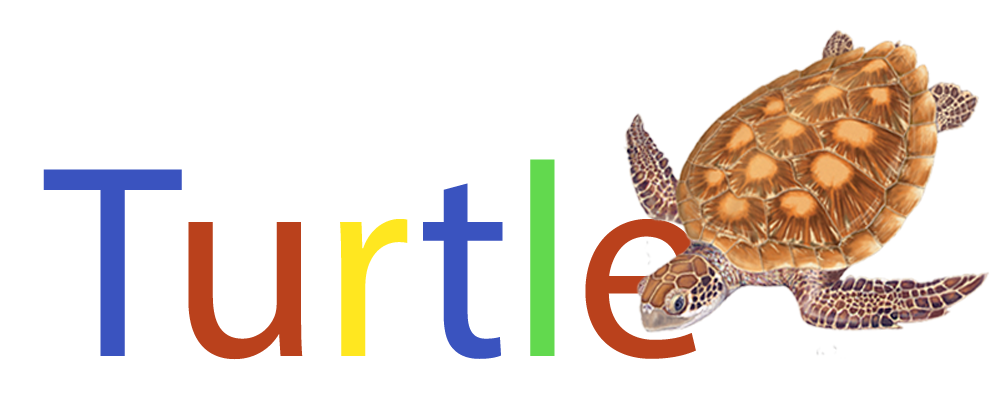
<style>
.page{position:relative;width:1000px;height:400px;background:#ffffff}
.page>*{position:absolute;margin:0}
.t1{font:276.9px "MyriadPro-Regular";color:#3a53bf}
.t2{font:276.9px "MyriadPro-Regular";color:#ba411c}
.t3{font:276.9px "MyriadPro-Regular";color:#ffe720}
.t4{font:276.9px "MyriadPro-Regular";color:#62d94e}
</style>
<div class="page">
<p class="t1" style="left:43px;top:159px;width:661px;height:201px">T<span class="t2">u</span><span class="t3">r</span>t<span class="t4">l</span><span class="t2">e</span></p>
</div>
